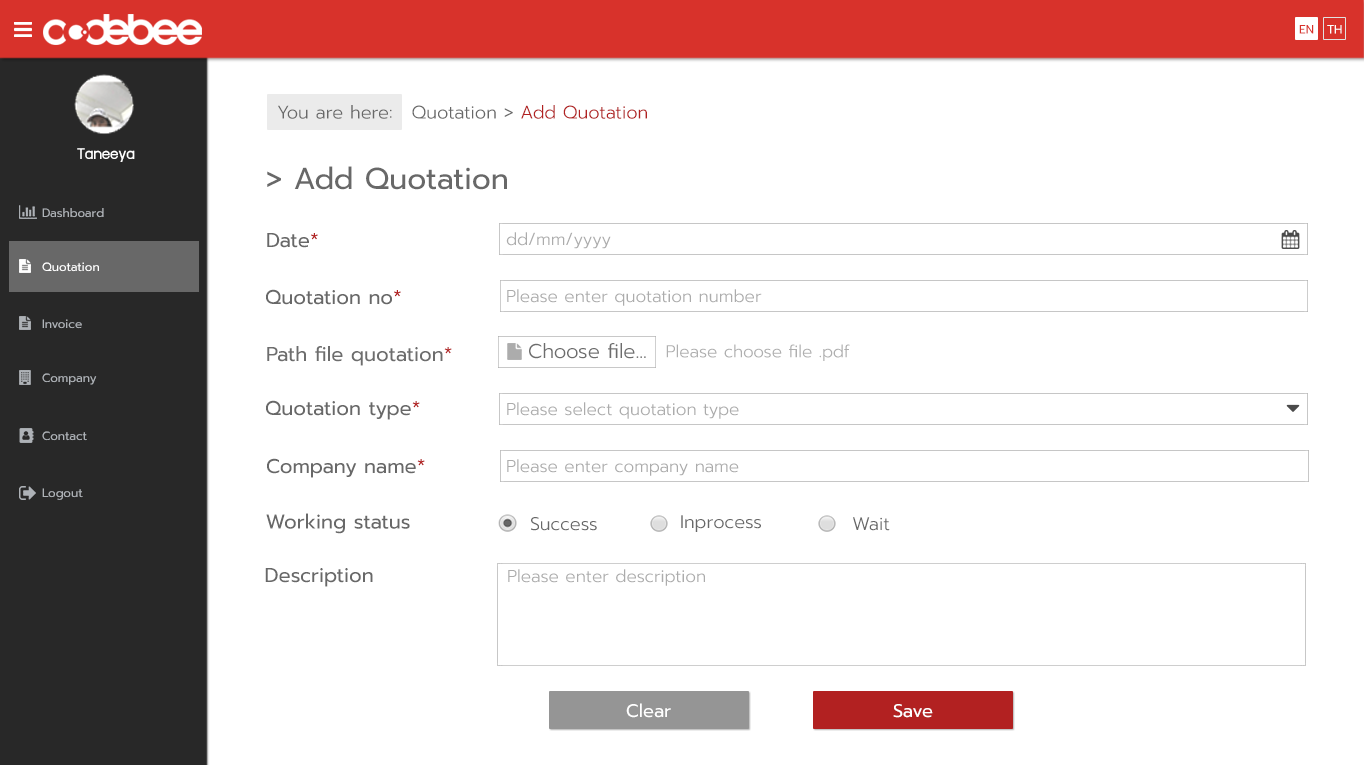
<style>
.page{position:relative;width:1364px;height:765px;background:#ffffff}
.page>*{position:absolute;margin:0}
.t1{font:12px "Prompt-Regular";color:#d8322b}
.t2{font:12px "Prompt-Regular";color:#ffffff}
.t3{font:18px "Prompt-Light";color:#686868}
.t4{font:18px "Prompt-Light";color:#b22121}
.t5{font:18px "supermarket";color:#ffffff}
.t6{font:30px "Prompt-Regular";color:#686868}
.t7{font:12px "Prompt-Regular";color:#aeb2b7}
.t8{font:20px "Prompt-Regular";color:#686868}
.t9{font:20px "Prompt-Regular";color:#b22121}
.t10{font:17px "Prompt-Light";color:#acacac}
.t11{font:20px "Prompt-Light";color:#686868}
.t12{font:18px "Prompt-Regular";color:#ffffff}
</style>
<div class="page">
<p class="t1" style="left:1299px;top:25px;width:15px;height:9px">EN</p>
<p class="t2" style="left:1327px;top:25px;width:15px;height:9px">TH</p>
<p class="t3" style="left:278px;top:105px;width:114px;height:14px">You are here:</p>
<p class="t4" style="left:412px;top:105px;width:235px;height:14px"><span class="t3">Quotation &gt; </span>Add Quotation</p>
<p class="t5" style="left:77px;top:148px;width:58px;height:14px">Taneeya</p>
<p class="t6" style="left:267px;top:166px;width:240px;height:24px">&gt; Add Quotation</p>
<p class="t7" style="left:42px;top:208px;width:62px;height:10px">Dashboard</p>
<p class="t8" style="left:267px;top:233px;width:51px;height:15px">Date<span class="t9">*</span></p>
<p class="t10" style="left:506px;top:232px;width:105px;height:17px">dd/mm/yyyy</p>
<p class="t2" style="left:42px;top:262px;width:57px;height:10px">Quotation</p>
<p class="t8" style="left:266px;top:289px;width:135px;height:16px">Quotation no<span class="t9">*</span></p>
<p class="t10" style="left:507px;top:289px;width:255px;height:17px">Please enter quotation number</p>
<p class="t7" style="left:42px;top:319px;width:40px;height:10px">Invoice</p>
<p class="t8" style="left:267px;top:346px;width:185px;height:20px">Path file quotation<span class="t9">*</span></p>
<p class="t11" style="left:529px;top:343px;width:117px;height:16px">Choose file...</p>
<p class="t10" style="left:666px;top:344px;width:184px;height:17px">Please choose file .pdf</p>
<p class="t7" style="left:42px;top:373px;width:55px;height:12px">Company</p>
<p class="t8" style="left:266px;top:400px;width:154px;height:20px">Quotation type<span class="t9">*</span></p>
<p class="t10" style="left:507px;top:402px;width:232px;height:17px">Please select quotation type</p>
<p class="t7" style="left:42px;top:431px;width:45px;height:10px">Contact</p>
<p class="t8" style="left:267px;top:458px;width:158px;height:20px">Company name<span class="t9">*</span></p>
<p class="t10" style="left:507px;top:459px;width:232px;height:17px">Please enter company name</p>
<p class="t7" style="left:42px;top:488px;width:41px;height:12px">Logout</p>
<p class="t8" style="left:266px;top:513px;width:144px;height:21px">Working status</p>
<p class="t3" style="left:531px;top:517px;width:66px;height:14px">Success</p>
<p class="t3" style="left:681px;top:515px;width:80px;height:17px">Inprocess</p>
<p class="t3" style="left:853px;top:517px;width:37px;height:14px">Wait</p>
<p class="t8" style="left:265px;top:568px;width:108px;height:19px">Description</p>
<p class="t10" style="left:508px;top:569px;width:197px;height:17px">Please enter description</p>
<p class="t12" style="left:626px;top:703px;width:45px;height:15px">Clear</p>
<p class="t12" style="left:893px;top:704px;width:40px;height:14px">Save</p>
</div>
